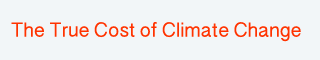
<style>
.page{position:relative;width:320px;height:60px;background:#f2f6f8}
.page>*{position:absolute;margin:0}
.t1{font:20px "DevanagariSangamMN";color:#ff3300}
</style>
<div class="page">
<p class="t1" style="left:11px;top:22px;width:290px;height:20px">The True Cost of Climate Change</p>
</div>
